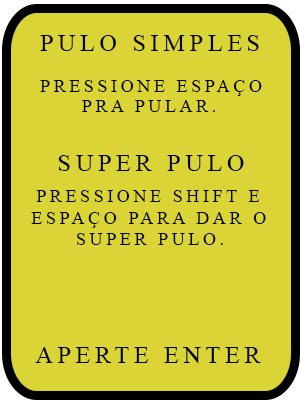
<style>
.page{position:relative;width:300px;height:400px;background:#dad436}
.page>*{position:absolute;margin:0}
.t1{font:24px "TimesNewRomanPSMT";letter-spacing:0.2em;color:#020202;text-transform:uppercase}
.t2{font:18px "TimesNewRomanPSMT";letter-spacing:0.2em;color:#020202;text-transform:uppercase}
</style>
<div class="page">
<p class="t1" style="left:40px;top:35px;width:219px;height:16px">pulo simples</p>
<p class="t2" style="left:40px;top:80px;width:222px;height:16px">pressione espaço</p>
<p class="t2" style="left:82px;top:100px;width:133px;height:12px">pra pular.</p>
<p class="t1" style="left:58px;top:155px;width:186px;height:16px">super pulo</p>
<p class="t2" style="left:36px;top:190px;width:224px;height:12px">Pressione shift e</p>
<p class="t2" style="left:31px;top:212px;width:235px;height:16px">espaço para dar o</p>
<p class="t2" style="left:77px;top:233px;width:146px;height:12px">super pulo.</p>
<p class="t1" style="left:35px;top:347px;width:226px;height:17px">aperte enter</p>
</div>
